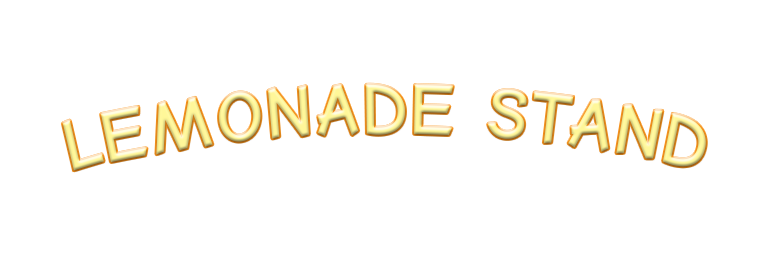
<style>
.page{position:relative;width:768px;height:256px;background:#ffffff}
.page>*{position:absolute;margin:0}
.t1{font:72px "ComicNeueAngular-Bold";color:#fff799}
</style>
<div class="page">
<p class="t1" style="left:62px;top:84px;width:644px;height:87px">LEMONADE STAND</p>
</div>
